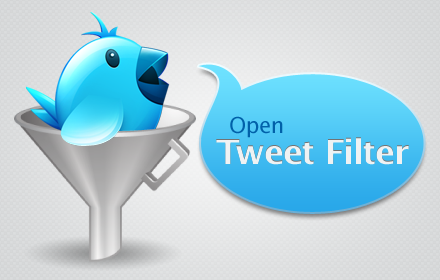
<style>
.page{position:relative;width:440px;height:280px}
.page>*{position:absolute;margin:0}
.t1{font:22px "LucidaSans";letter-spacing:-0.025em;color:#0161a9}
.t2{font:22.2px "LucidaSans";letter-spacing:-0.025em;color:#0161a9}
.t3{font:34.7px "LucidaSans-Demi";letter-spacing:-0.025em;color:#eff2f3}
.t4{font:22.2px "LucidaSans";letter-spacing:-0.025em;color:#ffffff}
</style>
<div class="page">
<p class="t1" style="left:230px;top:116px;width:53px;height:22px"><span class="t2">  </span>Open</p>
<p class="t3" style="left:216px;top:137px;width:193px;height:28px"><span class="t4"> <br></span>Tweet Filter</p>
</div>
